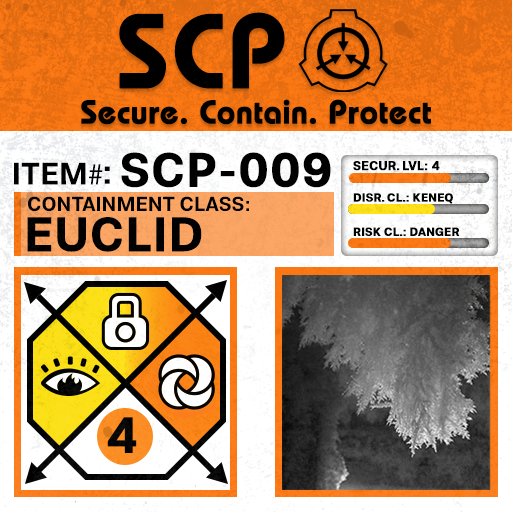
<style>
.page{position:relative;width:512px;height:512px}
.page>*{position:absolute;margin:0}
.t1{font:105.8px "BauhausLT-Demi";color:#000000;font-weight:bold}
.t2{font:33px "BauhausLT-Demi";color:#000000;font-weight:bold}
.t3{font:47.6px "Molde-Semibold";color:#000000;font-weight:bold}
.t4{font:12.5px "Molde-Semibold";color:#000000;font-weight:bold}
.t5{font:31.1px "Molde-Semibold";color:#000000}
.t6{font:31.1px "MyriadPro-Regular";color:#000000}
.t7{font:34.5px "Molde-Semibold";color:#000000}
.t8{font:20.3px "Molde-Semibold";color:#000000}
.t9{font:11.7px "Molde-Semibold";color:#000000;font-weight:bold}
.t10{font:47.8px "Molde-Semibold";color:#000000;font-weight:bold}
</style>
<div class="page">
<p class="t1" style="left:119px;top:12px;width:166px;height:77px">SCP</p>
<p class="t2" style="left:81px;top:99px;width:350px;height:26px">Secure. Contain. Protect</p>
<p class="t3" style="left:121px;top:152px;width:210px;height:36px">SCP-009</p>
<p class="t4" style="left:353px;top:161px;width:87px;height:10px">SECUR. LVL: 4</p>
<p class="t5" style="left:14px;top:162px;width:89px;height:23px">ITEM<span class="t6">#</span></p>
<p class="t7" style="left:104px;top:166px;width:6px;height:18px">:</p>
<p class="t8" style="left:28px;top:196px;width:221px;height:16px">CONTAINMENT CLASS:</p>
<p class="t9" style="left:353px;top:193px;width:100px;height:11px">DISR. CL.: KENEQ</p>
<p class="t10" style="left:27px;top:217px;width:175px;height:35px">EUCLID</p>
<p class="t9" style="left:353px;top:227px;width:107px;height:9px">RISK CL.: DANGER</p>
</div>
